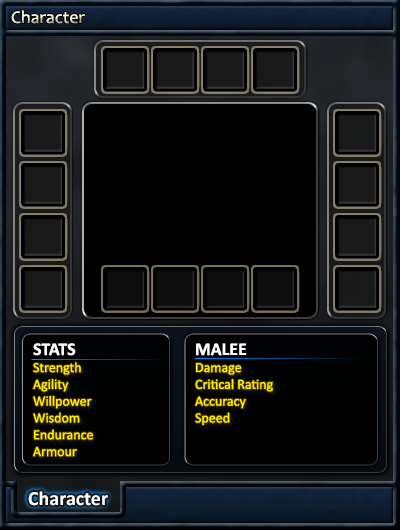
<style>
.page{position:relative;width:400px;height:530px;background:#000000}
.page>*{position:absolute;margin:0}
.t1{font:18px "Candara";color:#fefcdd}
.t2{font:18px "Calibri-Bold";color:#ffffff}
.t3{font:14px "Calibri";color:#fff000}
.t4{font:20px "Calibri-Bold";color:#ffffff}
</style>
<div class="page">
<p class="t1" style="left:11px;top:10px;width:74px;height:14px">Character</p>
<p class="t2" style="left:33px;top:343px;width:43px;height:13px">STATS</p>
<p class="t2" style="left:196px;top:343px;width:51px;height:13px">MALEE</p>
<p class="t3" style="left:33px;top:362px;width:60px;height:95px">Strength<br>Agility<br>Willpower<br>Wisdom<br>Endurance<br>Armour</p>
<p class="t3" style="left:195px;top:363px;width:78px;height:62px">Damage<br>Critical Rating<br>Accuracy<br>Speed</p>
<p class="t4" style="left:28px;top:491px;width:80px;height:15px">Character</p>
</div>
